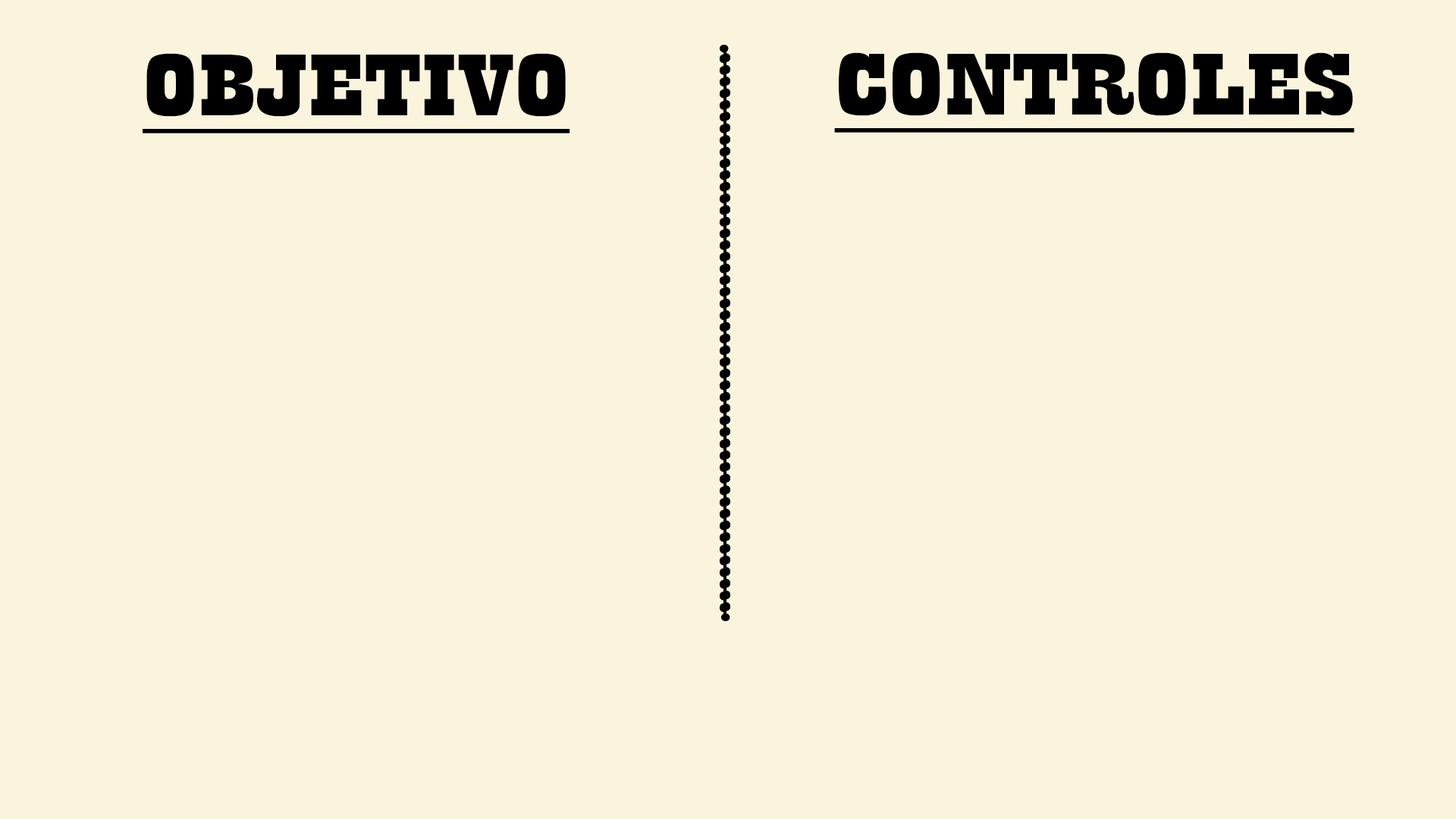
<style>
.page{position:relative;width:1456px;height:819px;background:#fbf4dd}
.page>*{position:absolute;margin:0}
.t1{font:91px "Playbill";color:#000000;text-decoration:underline;scale:2 1}
</style>
<div class="page">
<p class="t1" style="left:143px;top:53px;width:427px;height:80px">OBJETIVO</p>
<p class="t1" style="left:834px;top:52px;width:520px;height:81px">CONTROLES</p>
</div>
